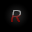
<style>
.page{position:relative;width:32px;height:32px;background:#000000}
.page>*{position:absolute;margin:0}
.t1{font:16.7px "Kalinga";letter-spacing:0.34em;font-style:italic}
</style>
<div class="page">
<p class="t1" style="left:11px;top:10px;width:10px;height:12px">R</p>
</div>
